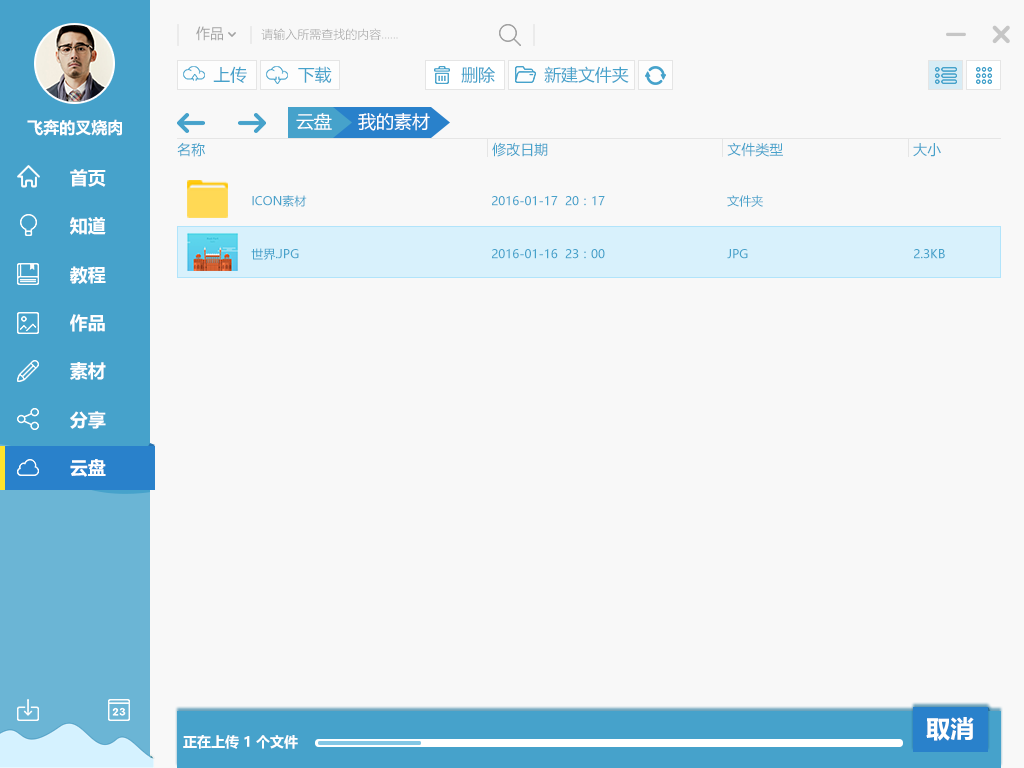
<style>
.page{position:relative;width:1024px;height:768px;background:#f8f8f8}
.page>*{position:absolute;margin:0}
.t1{font:14px "MicrosoftYaHei";color:#a3a3a3}
.t2{font:12px "MicrosoftYaHeiLight";color:#a3a3a3}
.t3{font:17px "MicrosoftYaHei";color:#46a2cb}
.t4{font:18px "MicrosoftYaHei";color:#ffffff}
.t5{font:16px "MicrosoftYaHei-Bold";color:#ffffff}
.t6{font:14px "MicrosoftYaHei";color:#46a2cb}
.t7{font:18px "MicrosoftYaHei-Bold";color:#ffffff}
.t8{font:12px "MicrosoftYaHei";color:#46a2cb}
.t9{font:24px "MicrosoftYaHei-Bold";color:#ffffff}
.t10{font:14px "MicrosoftYaHei-Bold";color:#ffffff}
</style>
<div class="page">
<p class="t1" style="left:196px;top:26px;width:27px;height:15px">作品</p>
<p class="t2" style="left:261px;top:28px;width:137px;height:12px">请输入所需查找的内容……</p>
<p class="t3" style="left:213px;top:66px;width:34px;height:17px">上传</p>
<p class="t3" style="left:298px;top:66px;width:34px;height:17px">下载</p>
<p class="t3" style="left:461px;top:66px;width:34px;height:17px">删除</p>
<p class="t3" style="left:544px;top:66px;width:85px;height:17px">新建文件夹</p>
<p class="t4" style="left:296px;top:113px;width:36px;height:17px">云盘</p>
<p class="t4" style="left:358px;top:113px;width:72px;height:18px">我的素材</p>
<p class="t5" style="left:27px;top:119px;width:95px;height:17px">飞奔的叉烧肉</p>
<p class="t6" style="left:177px;top:142px;width:28px;height:15px">名称</p>
<p class="t6" style="left:492px;top:142px;width:56px;height:15px">修改日期</p>
<p class="t6" style="left:727px;top:142px;width:56px;height:15px">文件类型</p>
<p class="t6" style="left:913px;top:143px;width:28px;height:14px">大小</p>
<p class="t7" style="left:70px;top:169px;width:36px;height:18px">首页</p>
<p class="t8" style="left:252px;top:195px;width:55px;height:12px">ICON素材</p>
<p class="t8" style="left:492px;top:196px;width:113px;height:10px">2016-01-17  20：17</p>
<p class="t8" style="left:727px;top:195px;width:36px;height:12px">文件夹</p>
<p class="t7" style="left:70px;top:217px;width:36px;height:18px">知道</p>
<p class="t8" style="left:251px;top:248px;width:48px;height:12px">世界.JPG</p>
<p class="t8" style="left:492px;top:249px;width:113px;height:10px">2016-01-16  23：00</p>
<p class="t8" style="left:727px;top:249px;width:21px;height:10px">JPG</p>
<p class="t8" style="left:914px;top:249px;width:31px;height:10px">2.3KB</p>
<p class="t7" style="left:70px;top:266px;width:36px;height:18px">教程</p>
<p class="t7" style="left:70px;top:314px;width:35px;height:18px">作品</p>
<p class="t7" style="left:70px;top:362px;width:36px;height:18px">素材</p>
<p class="t7" style="left:70px;top:411px;width:36px;height:18px">分享</p>
<p class="t7" style="left:70px;top:459px;width:36px;height:18px">云盘</p>
<p class="t9" style="left:926px;top:717px;width:48px;height:24px">取消</p>
<p class="t10" style="left:183px;top:735px;width:115px;height:14px">正在上传 1 个文件</p>
</div>
